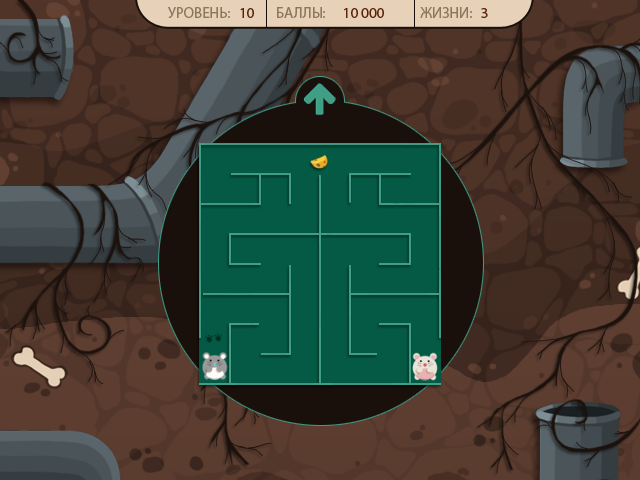
<style>
.page{position:relative;width:640px;height:480px}
.page>*{position:absolute;margin:0}
.t1{font:15px "MyriadPro-Regular";color:#8d775c;text-transform:uppercase}
.t2{font:15px "MyriadPro-Regular";color:#5a220a;text-transform:uppercase}
</style>
<div class="page">
<p class="t1" style="left:168px;top:7px;width:304px;height:11px">Уровень:   Баллы:    Жизни:</p>
<p class="t2" style="left:240px;top:8px;width:248px;height:10px">10            10 000          3</p>
</div>
